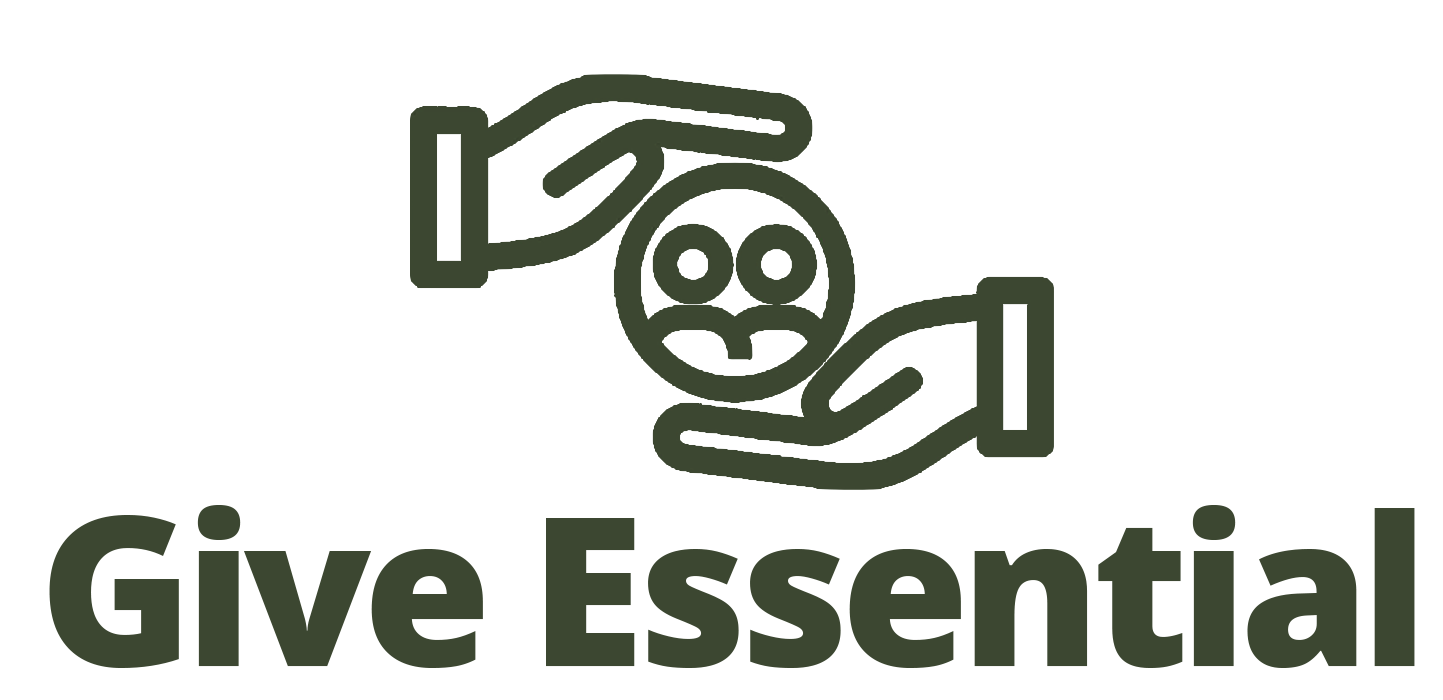
<style>
.page{position:relative;width:1443px;height:700px;background:#ffffff}
.page>*{position:absolute;margin:0}
.t1{font:208.3px "OpenSans-ExtraBold";letter-spacing:-0.04em;color:#3c4731}
</style>
<div class="page">
<p class="t1" style="left:49px;top:505px;width:1366px;height:163px">Give Essential</p>
</div>
